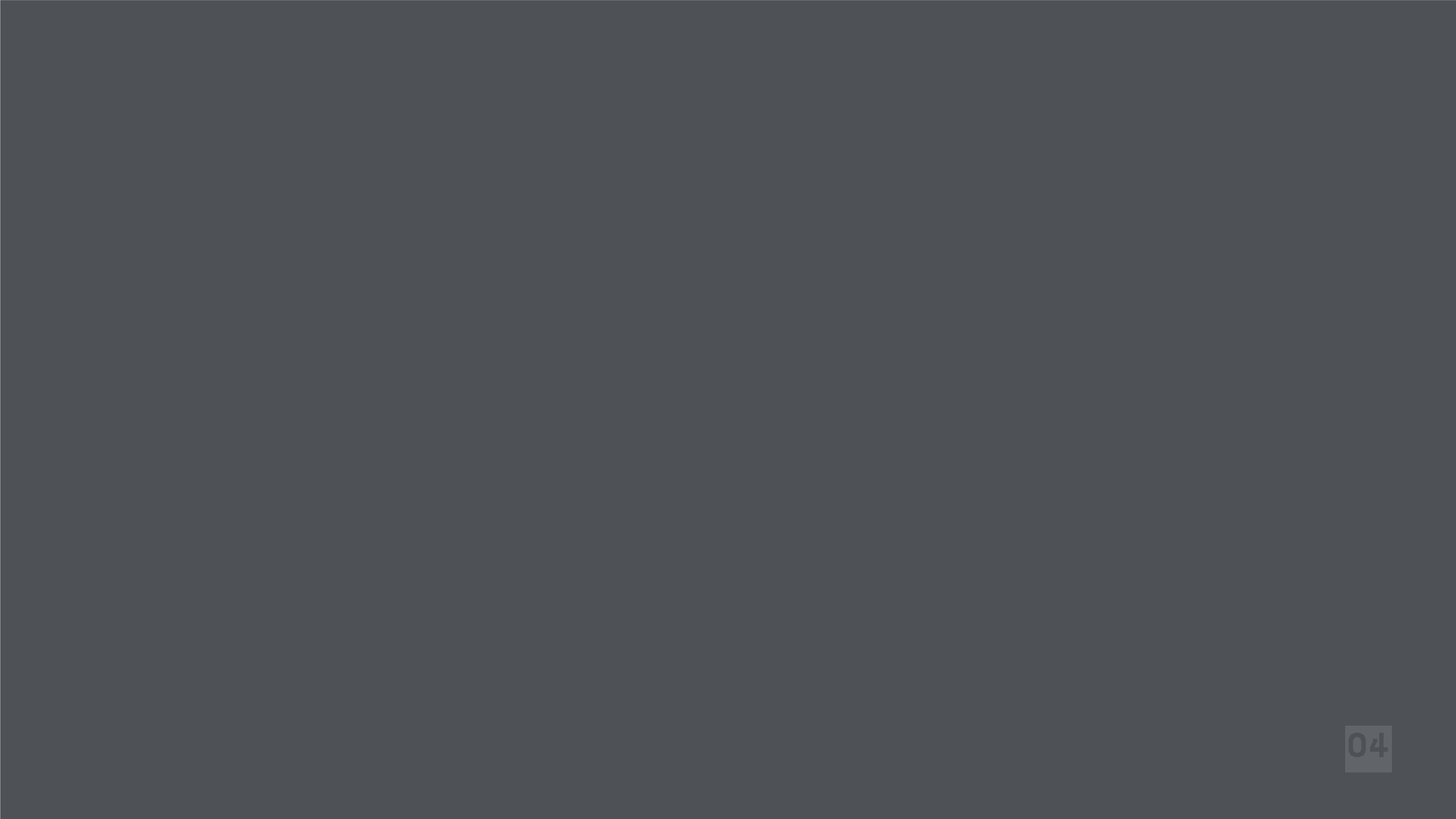
<style>
.page{position:relative;width:1456px;height:819px;background:#4e5156}
.page>*{position:absolute;margin:0}
.t1{font:36.4px "CitizenOT-Bold";color:#4e5156}
</style>
<div class="page">
<p class="t1" style="left:1349px;top:733px;width:39px;height:24px">04</p>
</div>
